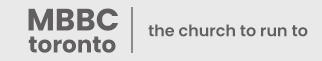
<style>
.page{position:relative;width:322px;height:61px;background:#e9e9e9}
.page>*{position:absolute;margin:0}
.t1{font:31px "Poppins-Bold";color:#615f5f}
.t2{font:16px "Poppins-SemiBold";color:#615f5f}
.t3{font:23px "Poppins-Bold";color:#615f5f}
</style>
<div class="page">
<p class="t1" style="left:28px;top:8px;width:90px;height:23px">MBBC</p>
<p class="t2" style="left:148px;top:24px;width:160px;height:13px">the church to run to</p>
<p class="t3" style="left:28px;top:36px;width:88px;height:17px">toronto</p>
</div>
